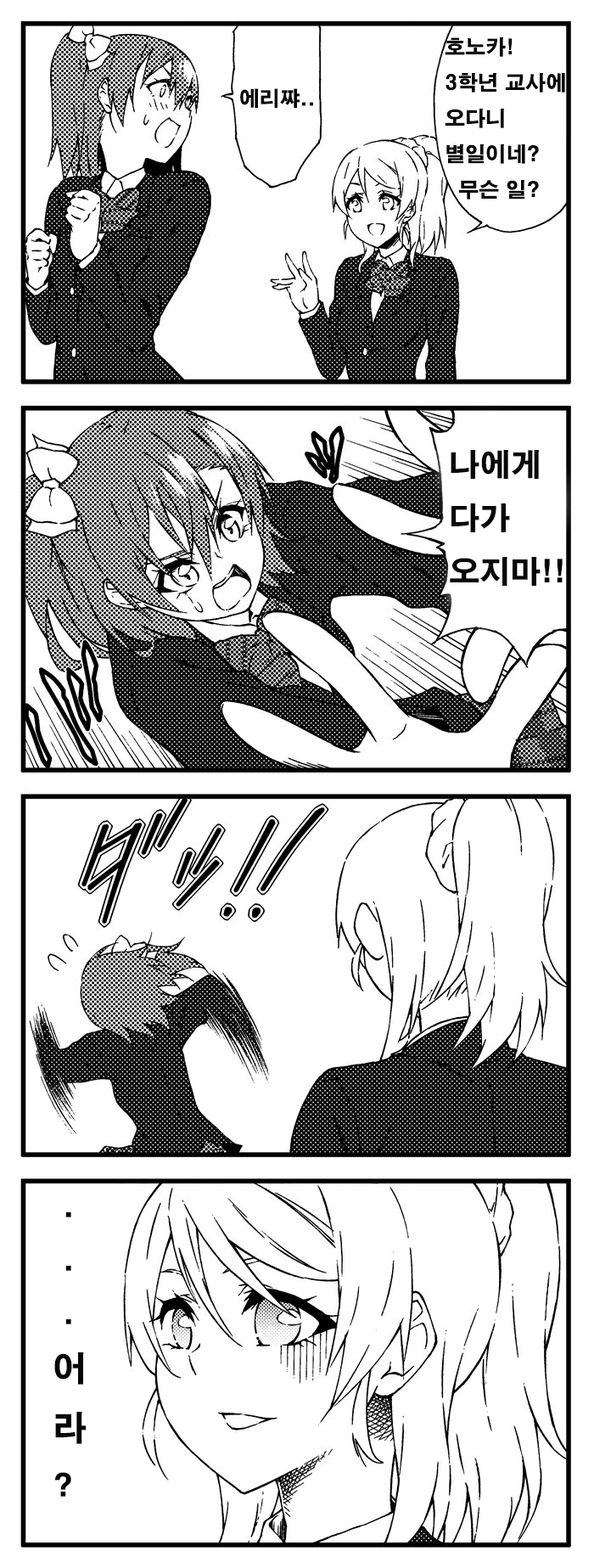
<style>
.page{position:relative;width:594px;height:1568px;background:#ffffff}
.page>*{position:absolute;margin:0}
.t1{font:20.4px "H2gtrE";color:#070707}
.t2{font:30.6px "H2gtrE";color:#070707}
.t3{font:34px "H2gtrE";color:#070707}
</style>
<div class="page">
<p class="t1" style="left:445px;top:37px;width:120px;height:163px">호노카!<br>3학년 교사에 오다니 별일이네?<br>  무슨 일?</p>
<p class="t1" style="left:240px;top:88px;width:73px;height:21px">에리쨔..</p>
<p class="t2" style="left:450px;top:450px;width:113px;height:136px">나에게<br>다가<br>오지마!!!</p>
<p class="t2" style="left:54px;top:1212px;width:33px;height:285px">.<br> .<br> .<br><span class="t3">어<br>라<br></span>?</p>
</div>
